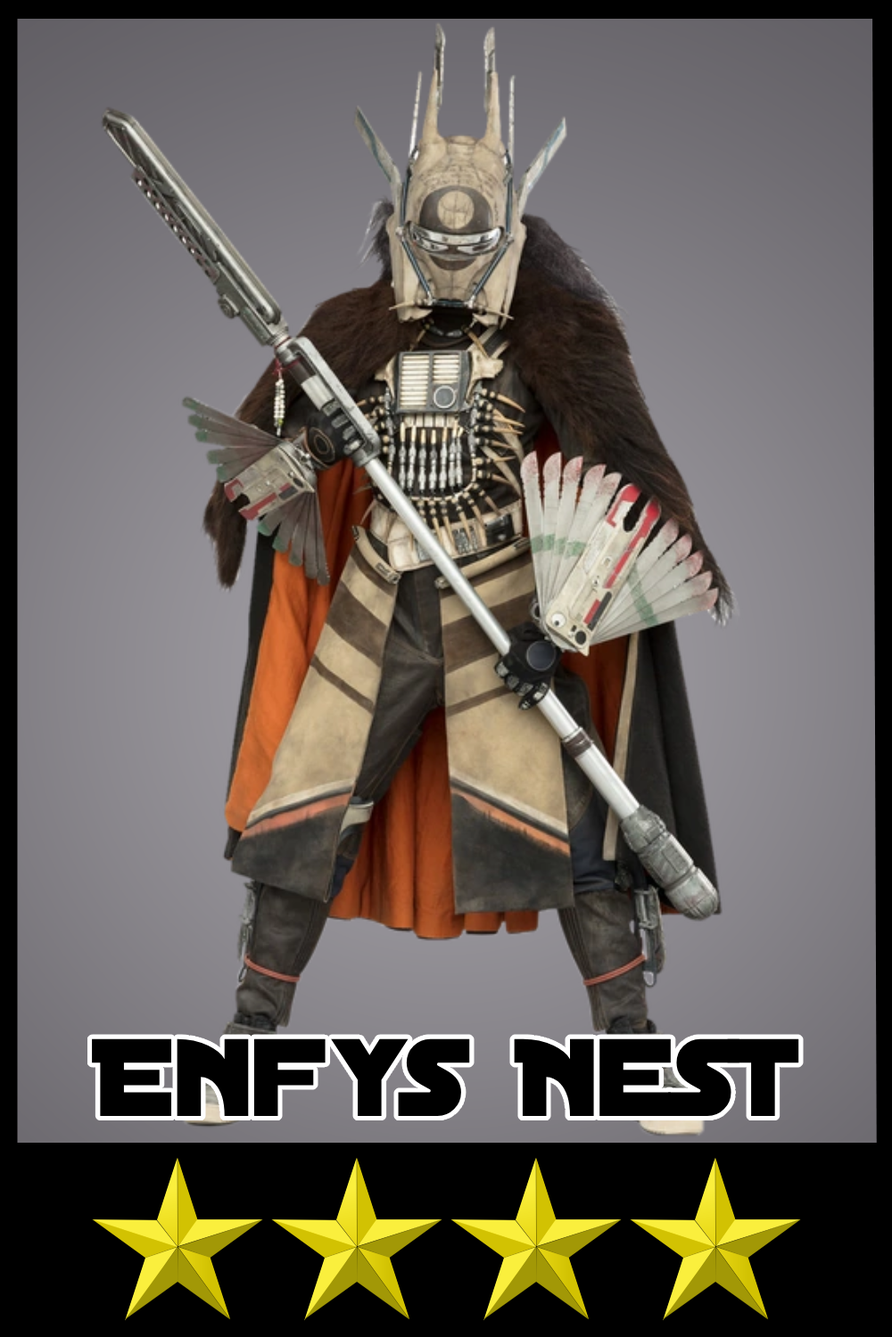
<style>
.page{position:relative;width:892px;height:1337px}
.page>*{position:absolute;margin:0}
.t1{font:118.3px "DistantGalaxy";color:#000000}
</style>
<div class="page">
<p class="t1" style="left:92px;top:1039px;width:707px;height:77px">Enfys Nest</p>
</div>
